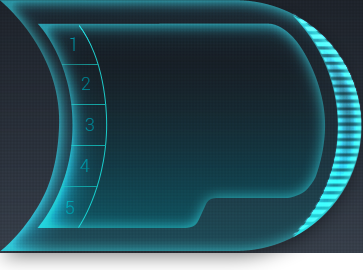
<style>
.page{position:relative;width:363px;height:270px}
.page>*{position:absolute;margin:0}
.t1{font:18px "Roboto-Light";color:#0092a3}
.t2{font:18px "Roboto-Light";color:#007885}
.t3{font:18px "Roboto-Light";color:#008a9b}
.t4{font:18px "Roboto-Light";color:#00a2af}
</style>
<div class="page">
<p class="t1" style="left:70px;top:37px;width:5px;height:14px">1</p>
<p class="t2" style="left:81px;top:77px;width:9px;height:13px">2</p>
<p class="t2" style="left:85px;top:118px;width:9px;height:13px">3</p>
<p class="t3" style="left:80px;top:159px;width:10px;height:13px">4</p>
<p class="t4" style="left:66px;top:201px;width:8px;height:13px">5</p>
</div>
